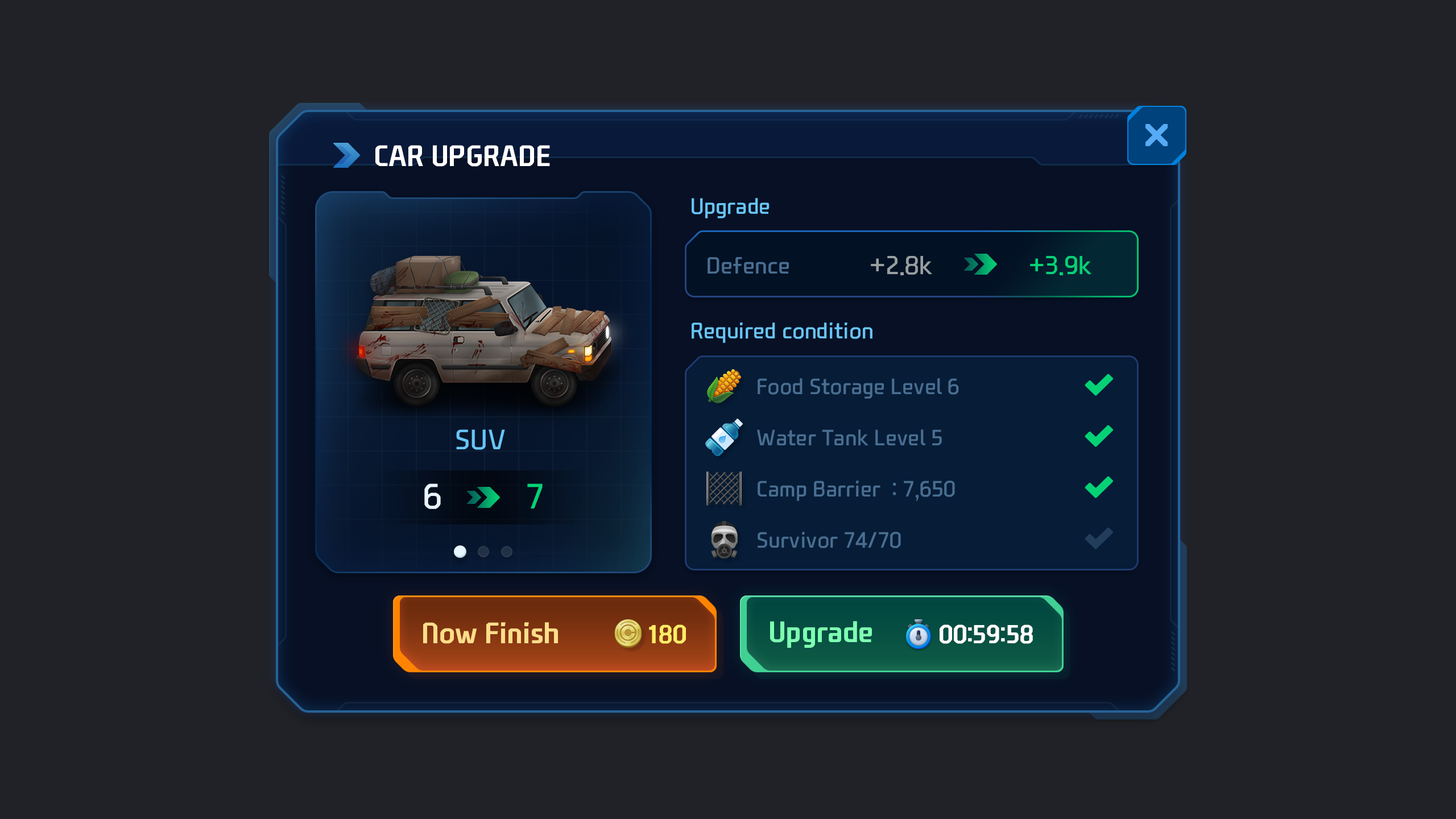
<style>
.page{position:relative;width:1456px;height:819px;background:#212227}
.page>*{position:absolute;margin:0}
.t1{font:28.4px "NEXONFootballGothicB";color:#ffffff;text-transform:uppercase}
.t2{font:21.6px "NEXONFootballGothicL";color:#68c5f7}
.t3{font:22.7px "NEXONFootballGothicL";color:#496e91}
.t4{font:25px "NEXONFootballGothicL";color:#979fa1}
.t5{font:25px "NEXONFootballGothicL";color:#05d275}
.t6{font:21.6px/51.2px "NEXONFootballGothicL";color:#496e91}
.t7{font:27.3px "NEXONFootballGothicL";color:#68c5f7}
.t8{font:34.1px "NEXONFootballGothicL";color:#e6f6ff}
.t9{font:34.1px "NEXONFootballGothicL";color:#05d275}
.t10{font:28.4px "NEXONFootballGothicB";color:#ffdd8a}
.t11{font:25px "NEXONFootballGothicB";color:#ffec66;text-transform:uppercase}
.t12{font:28.4px "NEXONFootballGothicB";color:#7effb1}
.t13{font:25px "NEXONFootballGothicB";color:#ffffff;text-transform:uppercase}
</style>
<div class="page">
<p class="t1" style="left:375px;top:145px;width:175px;height:22px">Car Upgrade</p>
<p class="t2" style="left:692px;top:198px;width:78px;height:20px">Upgrade</p>
<p class="t3" style="left:708px;top:257px;width:81px;height:17px">Defence</p>
<p class="t4" style="left:871px;top:256px;width:61px;height:19px">+2.8k</p>
<p class="t5" style="left:1030px;top:256px;width:61px;height:19px">+3.9k</p>
<p class="t2" style="left:692px;top:322px;width:180px;height:21px">Required condition</p>
<p class="t6" style="left:757px;top:378px;width:202px;height:170px">Food Storage Level 6<br>Water Tank Level 5<br>Camp Barrier  : 7,650<br>Survivor 74/70</p>
<p class="t7" style="left:456px;top:429px;width:49px;height:21px">SUV</p>
<p class="t8" style="left:424px;top:483px;width:17px;height:26px">6</p>
<p class="t9" style="left:527px;top:483px;width:16px;height:25px">7</p>
<p class="t10" style="left:423px;top:622px;width:135px;height:22px">Now Finish</p>
<p class="t11" style="left:649px;top:624px;width:37px;height:20px">180</p>
<p class="t12" style="left:770px;top:621px;width:102px;height:27px">Upgrade</p>
<p class="t13" style="left:940px;top:624px;width:93px;height:20px">00:59:58</p>
</div>
